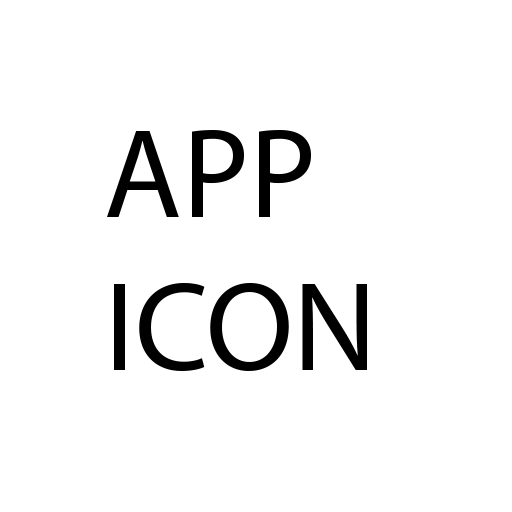
<style>
.page{position:relative;width:512px;height:512px;background:#ffffff}
.page>*{position:absolute;margin:0}
.t1{font:12px "MyriadPro-Regular";color:#000000}
</style>
<div class="page">
<p class="t1" style="left:107px;top:130px;width:260px;height:241px">APP<br>ICON</p>
</div>
